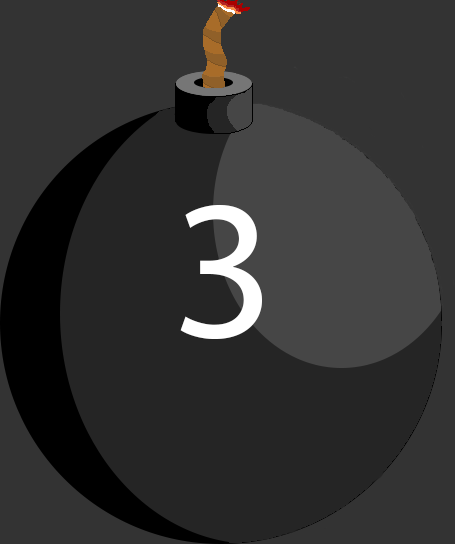
<style>
.page{position:relative;width:455px;height:544px;background:#333333}
.page>*{position:absolute;margin:0}
.t1{font:200px "MyriadPro-Regular";color:#ffffff}
</style>
<div class="page">
<p class="t1" style="left:180px;top:204px;width:82px;height:135px">3</p>
</div>
